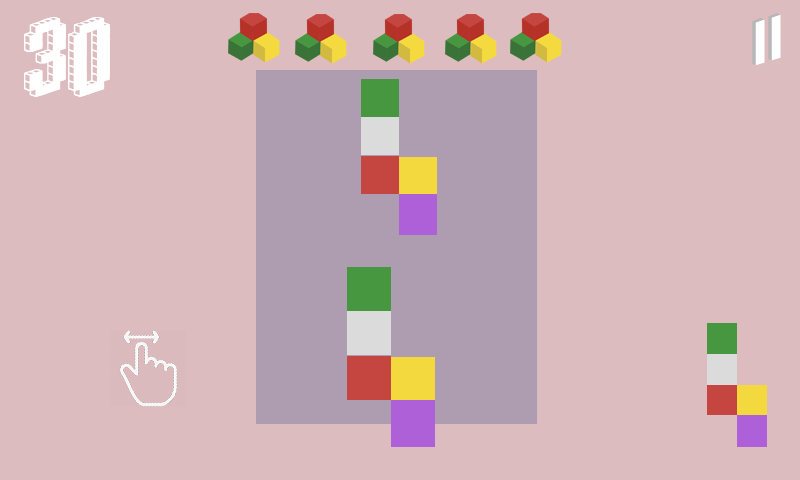
<style>
.page{position:relative;width:800px;height:480px;background:#ddbcbf}
.page>*{position:absolute;margin:0}
.t1{font:89px "Blox-(BRK";color:#ffffff}
</style>
<div class="page">
<p class="t1" style="left:24px;top:17px;width:86px;height:80px">30</p>
</div>
